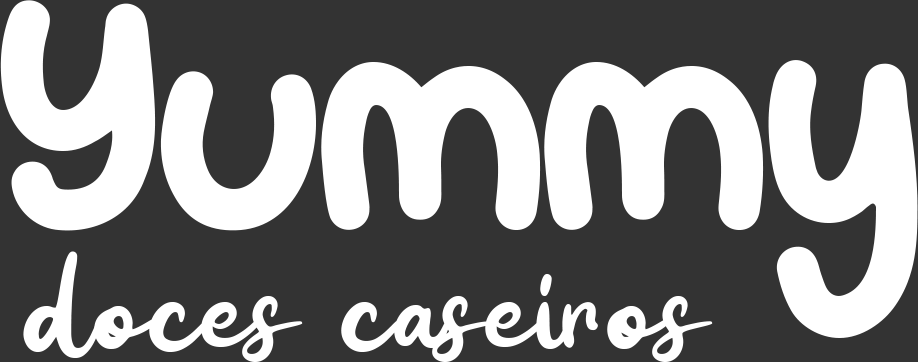
<style>
.page{position:relative;width:918px;height:362px;background:#333333}
.page>*{position:absolute;margin:0}
.t1{font:333.3px "PaperCandy-Regular";color:#ffffff}
.t2{font:200px "MittanCandy-Regular";color:#ffffff}
</style>
<div class="page">
<p class="t1" style="left:0px;top:0px;width:918px;height:338px">Yummy</p>
<p class="t2" style="left:23px;top:251px;width:690px;height:111px">doces caseiros</p>
</div>
